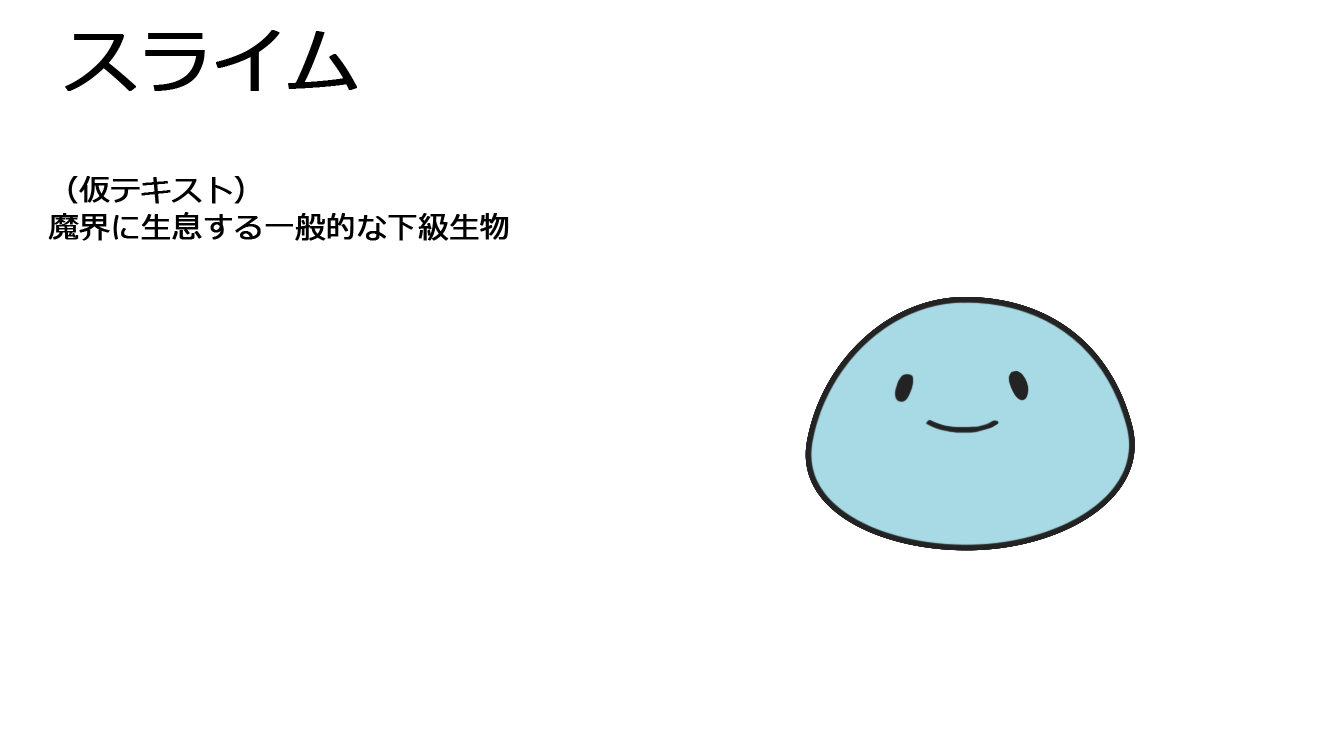
<style>
.page{position:relative;width:1334px;height:750px;background:#ffffff}
.page>*{position:absolute;margin:0}
.t1{font:72px "Meiryo";color:#000000;font-weight:bold}
.t2{font:30px "Meiryo";color:#000000;font-weight:bold}
</style>
<div class="page">
<p class="t1" style="left:65px;top:30px;width:292px;height:61px">スライム</p>
<p class="t2" style="left:48px;top:176px;width:461px;height:65px">（仮テキスト）<br><br>魔界に生息する一般的な下級生物</p>
</div>
